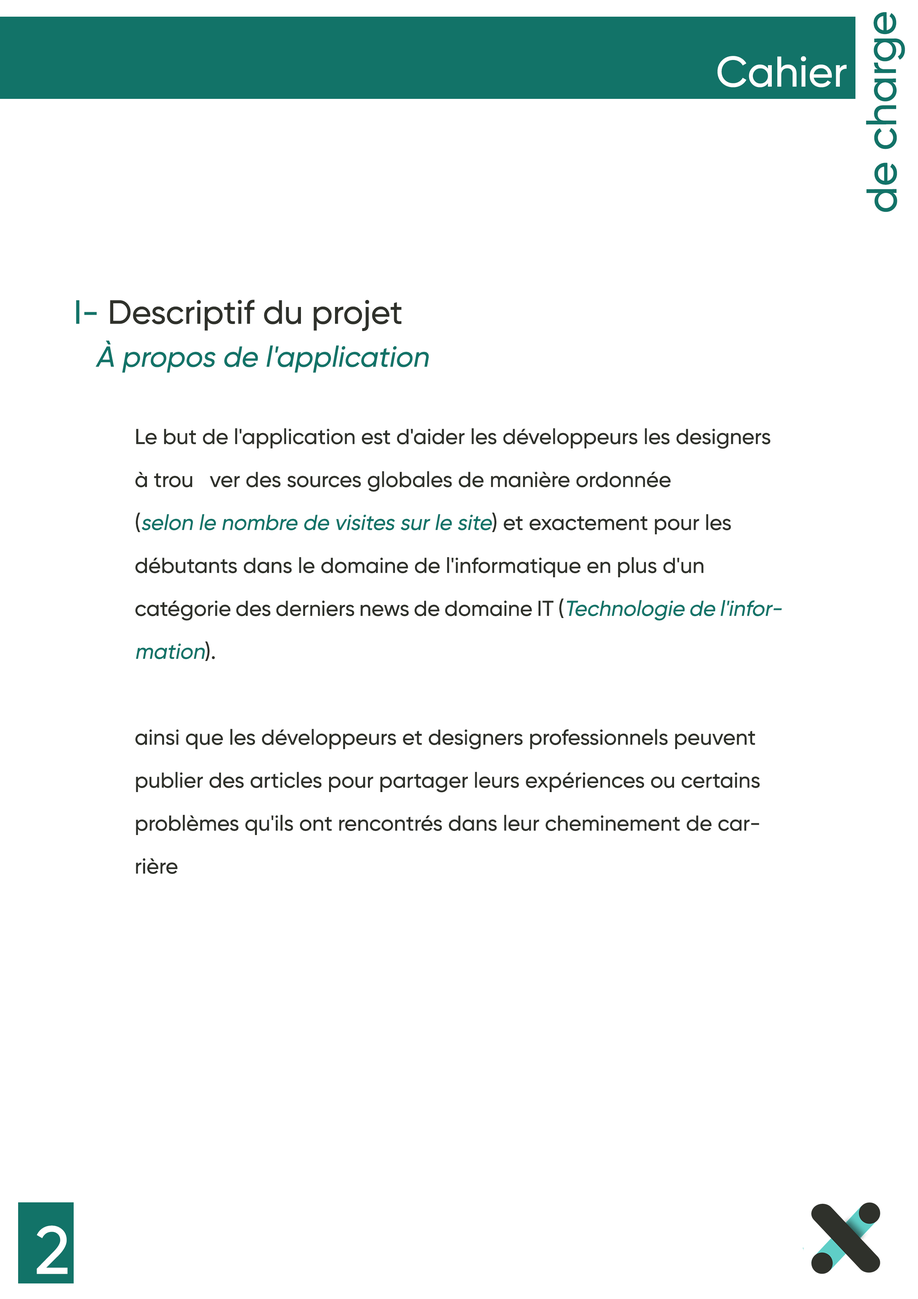
<style>
.page{position:relative;width:918px;height:1299px;background:#ffffff}
.page>*{position:absolute;margin:0}
.t1{font:42.9px "Gilroy-Medium";color:#127368}
.t2{font:42.9px "Gilroy-Medium";color:#ffffff}
.t3{font:29px/42.9px "Gilroy-Medium";color:#127368;font-style:italic}
.t4{font:33.7px/42.9px "Gilroy-Medium";color:#127368}
.t5{font:33.7px/42.9px "Gilroy-Medium";color:#2f312b}
.t6{font:21.6px/42.9px "Gilroy-Medium";color:#2f312b}
.t7{font:21.6px/42.9px "Gilroy-Medium";color:#127368;font-style:italic}
.t8{font:67.6px "Gilroy-Medium";color:#ffffff}
</style>
<div class="page">
<p class="t1" style="left:866px;top:12px;width:39px;height:200px;rotate:-90deg">de charge</p>
<p class="t2" style="left:717px;top:56px;width:130px;height:31px">Cahier</p>
<p class="t3" style="left:76px;top:300px;width:353px;height:73px"><span class="t4">I-</span><span class="t5"> Descriptif du projet<br>   </span>À propos de l'application</p>
<p class="t6" style="left:135px;top:428px;width:647px;height:446px">Le but de l'application est d'aider les développeurs les designers à trou   ver des sources globales de manière ordonnée <br>(<span class="t7">selon le nombre de visites sur le site</span>) et exactement pour les débutants dans le domaine de l'informatique en plus d'un catégorie des derniers news de domaine IT (<span class="t7">Technologie de l'information</span>).<br><br>ainsi que les développeurs et designers professionnels peuvent publier des articles pour partager leurs expériences ou certains problèmes qu'ils ont rencontrés dans leur cheminement de carrière</p>
<p class="t8" style="left:37px;top:1225px;width:31px;height:49px">2</p>
</div>
